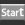
<style>
.page{position:relative;width:25px;height:25px;background:#333333}
.page>*{position:absolute;margin:0}
.t1{font:10px "Aller";color:#ffffff}
.t2{font:13.3px "Aller";color:#ffffff}
</style>
<div class="page">
<p class="t1" style="left:1px;top:7px;width:23px;height:10px">Star<span class="t2">t</span></p>
</div>
